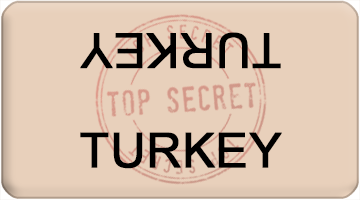
<style>
.page{position:relative;width:360px;height:200px;background:#e8d0bb}
.page>*{position:absolute;margin:0}
.t1{font:48px "ArialMT";color:#000000;font-weight:bold}
</style>
<div class="page">
<p class="t1" style="left:80px;top:32px;width:201px;height:37px;rotate:180deg">TURKEY</p>
<p class="t1" style="left:80px;top:132px;width:202px;height:37px">TURKEY</p>
</div>
